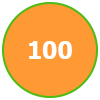
<style>
.page{position:relative;width:100px;height:100px;background:#ff9933}
.page>*{position:absolute;margin:0}
.t1{font:24px "Tahoma-Bold";color:#ffffff}
</style>
<div class="page">
<p class="t1" style="left:29px;top:41px;width:43px;height:18px">100</p>
</div>
